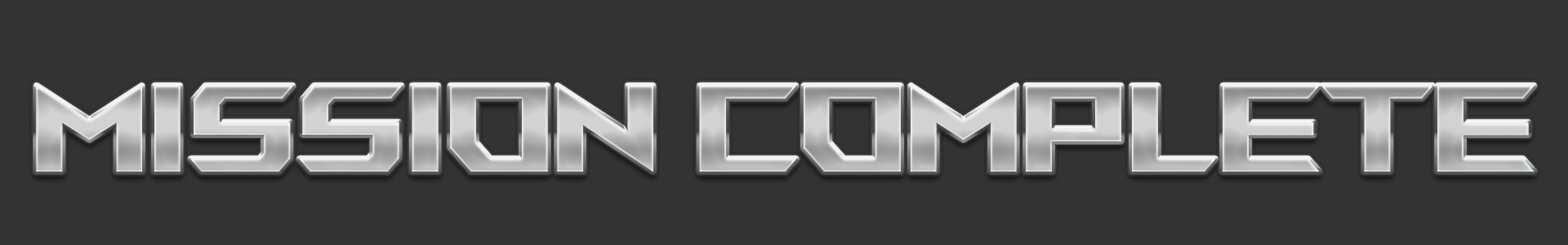
<style>
.page{position:relative;width:1568px;height:245px;background:#333333}
.page>*{position:absolute;margin:0}
.t1{font:122.5px "ROGFonts-Regular"}
</style>
<div class="page">
<p class="t1" style="left:36px;top:85px;width:1499px;height:87px">mission COMPLETE</p>
<p class="t1" style="left:36px;top:85px;width:1499px;height:87px">mission COMPLETE</p>
</div>
